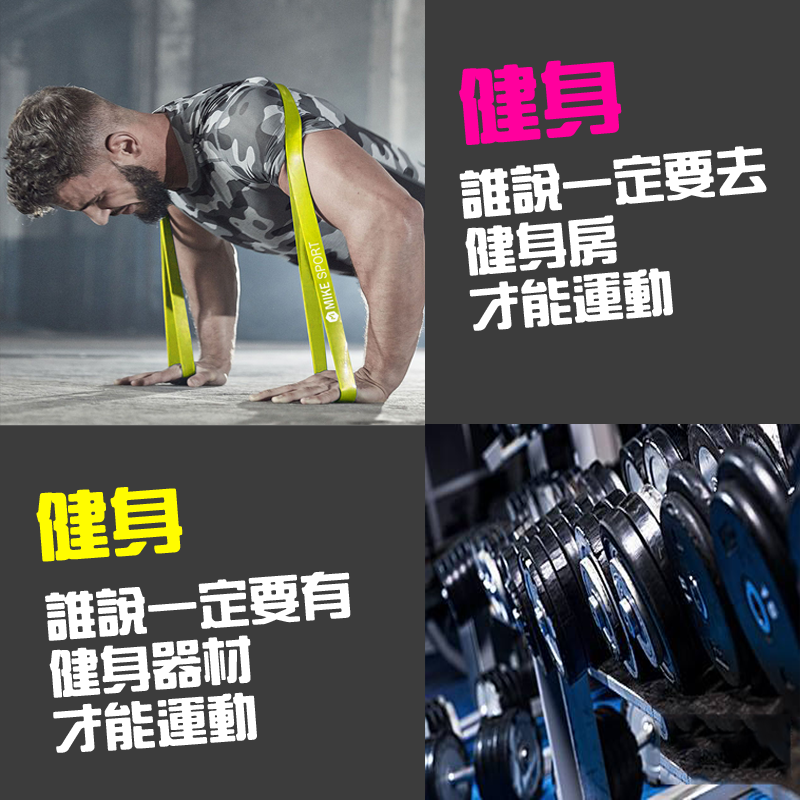
<style>
.page{position:relative;width:800px;height:800px;background:#3c3c3c}
.page>*{position:absolute;margin:0}
.t1{font:80px "HanWangZonYi";color:#ff009d;font-weight:bold}
.t2{font:50px "HanWangZonYi";color:#ffffff;font-weight:bold}
.t3{font:72px "HanWangZonYi";color:#fffc00;font-weight:bold}
</style>
<div class="page">
<p class="t1" style="left:459px;top:60px;width:163px;height:85px;rotate:-5deg">健身</p>
<p class="t2" style="left:459px;top:146px;width:308px;height:185px;rotate:-5deg">誰說一定要去<br>健身房<br>才能運動</p>
<p class="t3" style="left:36px;top:487px;width:147px;height:75px;rotate:-4deg">健身</p>
<p class="t2" style="left:45px;top:571px;width:306px;height:182px;rotate:-4deg">誰說一定要有<br>健身器材<br>才能運動</p>
</div>
